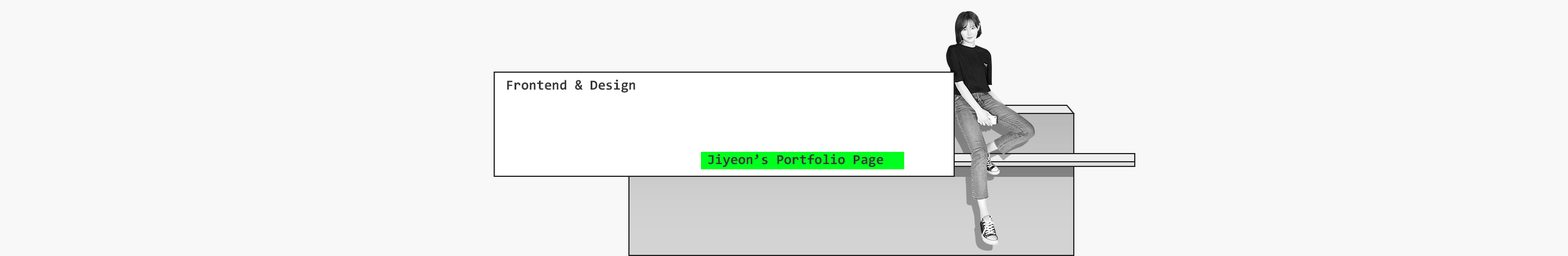
<style>
.page{position:relative;width:1568px;height:256px;background:#f8f8f8}
.page>*{position:absolute;margin:0}
.t1{font:13.9px "Consolas-Bold";color:#363636}
</style>
<div class="page">
<p class="t1" style="left:507px;top:79px;width:128px;height:13px">Frontend &amp; Design</p>
<p class="t1" style="left:709px;top:153px;width:174px;height:14px">Jiyeon’s Portfolio Page</p>
</div>
